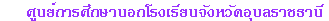
<style>
.page{position:relative;width:329px;height:21px;background:#ffffff}
.page>*{position:absolute;margin:0}
.t1{font:20px "JasmineDSEBold";color:#9933ff}
</style>
<div class="page">
<p class="t1" style="left:27px;top:2px;width:297px;height:19px">ÈÙ¹Âì¡ÒÃÈÖ¡ÉÒ¹Í¡âÃ§àÃÕÂ¹¨Ñ§ËÇÑ´ÍØºÅÃÒª¸Ò¹Õ</p>
<p class="t1" style="left:27px;top:2px;width:216px;height:19px">ÈÙ¹Âì¡ÒÃÈÖ¡ÉÒ¹Í¡âÃ§àÃÕÂ¹¨Ñ§ËÇÑ´</p>
<p class="t1" style="left:27px;top:2px;width:89px;height:19px">ÈÙ¹Âì¡ÒÃÈÖ¡ÉÒ</p>
</div>
